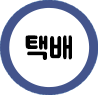
<style>
.page{position:relative;width:98px;height:95px;background:#ffffff}
.page>*{position:absolute;margin:0}
.t1{font:30px "BMJUA";color:#000000}
</style>
<div class="page">
<p class="t1" style="left:25px;top:35px;width:47px;height:25px">택배</p>
</div>
